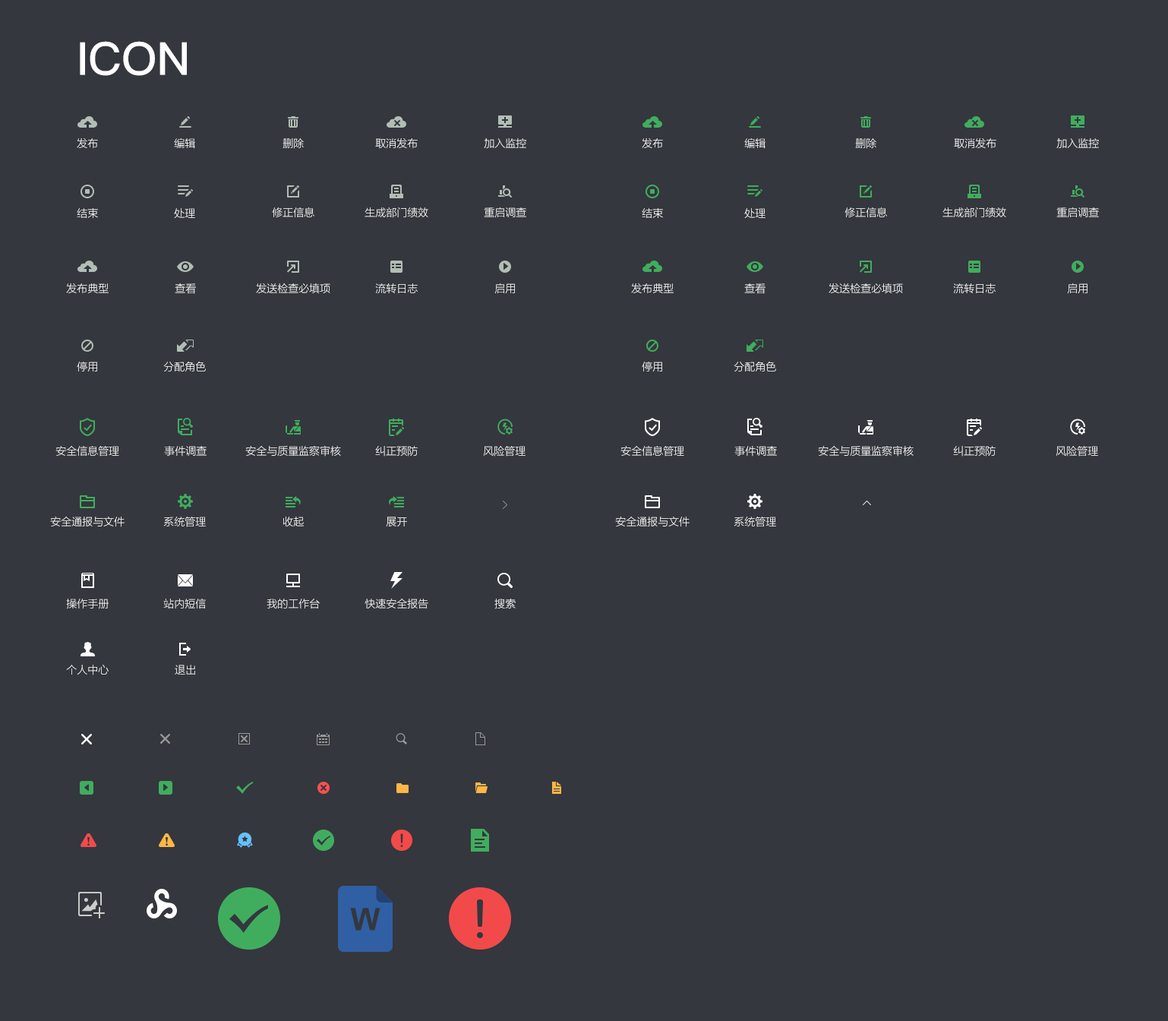
<style>
.page{position:relative;width:1168px;height:1021px;background:#34373d}
.page>*{position:absolute;margin:0}
.t1{font:45.6px "PingFangSC-Medium";color:#ffffff}
.t2{font:10.6px "FZLTXHK--GBK1-0";color:#ffffff}
.t3{font:10.6px "FZLTXHK--GBK1-0"}
</style>
<div class="page">
<p class="t1" style="left:80px;top:41px;width:107px;height:35px">ICON</p>
<p class="t2" style="left:77px;top:138px;width:21px;height:10px">发布</p>
<p class="t2" style="left:174px;top:138px;width:21px;height:11px">编辑</p>
<p class="t2" style="left:283px;top:138px;width:21px;height:11px">删除</p>
<p class="t2" style="left:375px;top:138px;width:43px;height:11px">取消发布</p>
<p class="t2" style="left:484px;top:138px;width:42px;height:10px">加入监控</p>
<p class="t2" style="left:642px;top:138px;width:21px;height:10px">发布</p>
<p class="t2" style="left:744px;top:138px;width:22px;height:11px">编辑</p>
<p class="t2" style="left:855px;top:138px;width:21px;height:11px">删除</p>
<p class="t2" style="left:954px;top:138px;width:42px;height:11px">取消发布</p>
<p class="t2" style="left:1056px;top:138px;width:43px;height:10px">加入监控</p>
<p class="t2" style="left:77px;top:208px;width:21px;height:10px">结束</p>
<p class="t2" style="left:174px;top:208px;width:21px;height:10px">处理</p>
<p class="t2" style="left:272px;top:207px;width:42px;height:11px">修正信息</p>
<p class="t2" style="left:365px;top:207px;width:63px;height:11px">生成部门绩效</p>
<p class="t2" style="left:484px;top:207px;width:42px;height:11px">重启调查</p>
<p class="t2" style="left:642px;top:208px;width:21px;height:10px">结束</p>
<p class="t2" style="left:744px;top:208px;width:22px;height:10px">处理</p>
<p class="t2" style="left:845px;top:207px;width:42px;height:11px">修正信息</p>
<p class="t2" style="left:943px;top:207px;width:63px;height:11px">生成部门绩效</p>
<p class="t2" style="left:1056px;top:207px;width:43px;height:11px">重启调查</p>
<p class="t2" style="left:66px;top:283px;width:43px;height:10px">发布典型</p>
<p class="t2" style="left:175px;top:283px;width:21px;height:11px">查看</p>
<p class="t2" style="left:256px;top:283px;width:74px;height:10px">发送检查必填项</p>
<p class="t2" style="left:375px;top:283px;width:43px;height:11px">流转日志</p>
<p class="t2" style="left:494px;top:283px;width:21px;height:11px">启用</p>
<p class="t2" style="left:631px;top:283px;width:43px;height:10px">发布典型</p>
<p class="t2" style="left:744px;top:283px;width:22px;height:11px">查看</p>
<p class="t2" style="left:829px;top:283px;width:74px;height:10px">发送检查必填项</p>
<p class="t2" style="left:953px;top:283px;width:43px;height:11px">流转日志</p>
<p class="t2" style="left:1067px;top:283px;width:21px;height:11px">启用</p>
<p class="t2" style="left:77px;top:362px;width:20px;height:9px">停用</p>
<p class="t2" style="left:163px;top:361px;width:43px;height:10px">分配角色</p>
<p class="t2" style="left:642px;top:362px;width:20px;height:9px">停用</p>
<p class="t2" style="left:734px;top:361px;width:42px;height:10px">分配角色</p>
<p class="t2" style="left:55px;top:446px;width:64px;height:10px">安全信息管理</p>
<p class="t2" style="left:164px;top:446px;width:43px;height:10px">事件调查</p>
<p class="t2" style="left:245px;top:445px;width:96px;height:11px">安全与质量监察审核</p>
<p class="t3" style="left:375px;top:446px;width:43px;height:10px">纠正预防</p>
<p class="t2" style="left:483px;top:446px;width:43px;height:10px">风险管理</p>
<p class="t2" style="left:621px;top:446px;width:63px;height:10px">安全信息管理</p>
<p class="t2" style="left:734px;top:446px;width:43px;height:10px">事件调查</p>
<p class="t2" style="left:818px;top:445px;width:96px;height:11px">安全与质量监察审核</p>
<p class="t3" style="left:953px;top:446px;width:43px;height:10px">纠正预防</p>
<p class="t2" style="left:1056px;top:446px;width:42px;height:10px">风险管理</p>
<p class="t2" style="left:50px;top:516px;width:75px;height:11px">安全通报与文件</p>
<p class="t2" style="left:163px;top:516px;width:43px;height:11px">系统管理</p>
<p class="t2" style="left:283px;top:516px;width:21px;height:11px">收起</p>
<p class="t3" style="left:386px;top:516px;width:21px;height:11px">展开</p>
<p class="t2" style="left:615px;top:516px;width:75px;height:11px">安全通报与文件</p>
<p class="t2" style="left:734px;top:516px;width:42px;height:11px">系统管理</p>
<p class="t2" style="left:66px;top:599px;width:43px;height:10px">操作手册</p>
<p class="t2" style="left:163px;top:599px;width:43px;height:9px">站内短信</p>
<p class="t2" style="left:267px;top:599px;width:53px;height:9px">我的工作台</p>
<p class="t2" style="left:365px;top:599px;width:63px;height:9px">快速安全报告</p>
<p class="t2" style="left:494px;top:599px;width:22px;height:10px">搜索</p>
<p class="t2" style="left:66px;top:665px;width:43px;height:10px">个人中心</p>
<p class="t2" style="left:175px;top:665px;width:20px;height:9px">退出</p>
</div>
